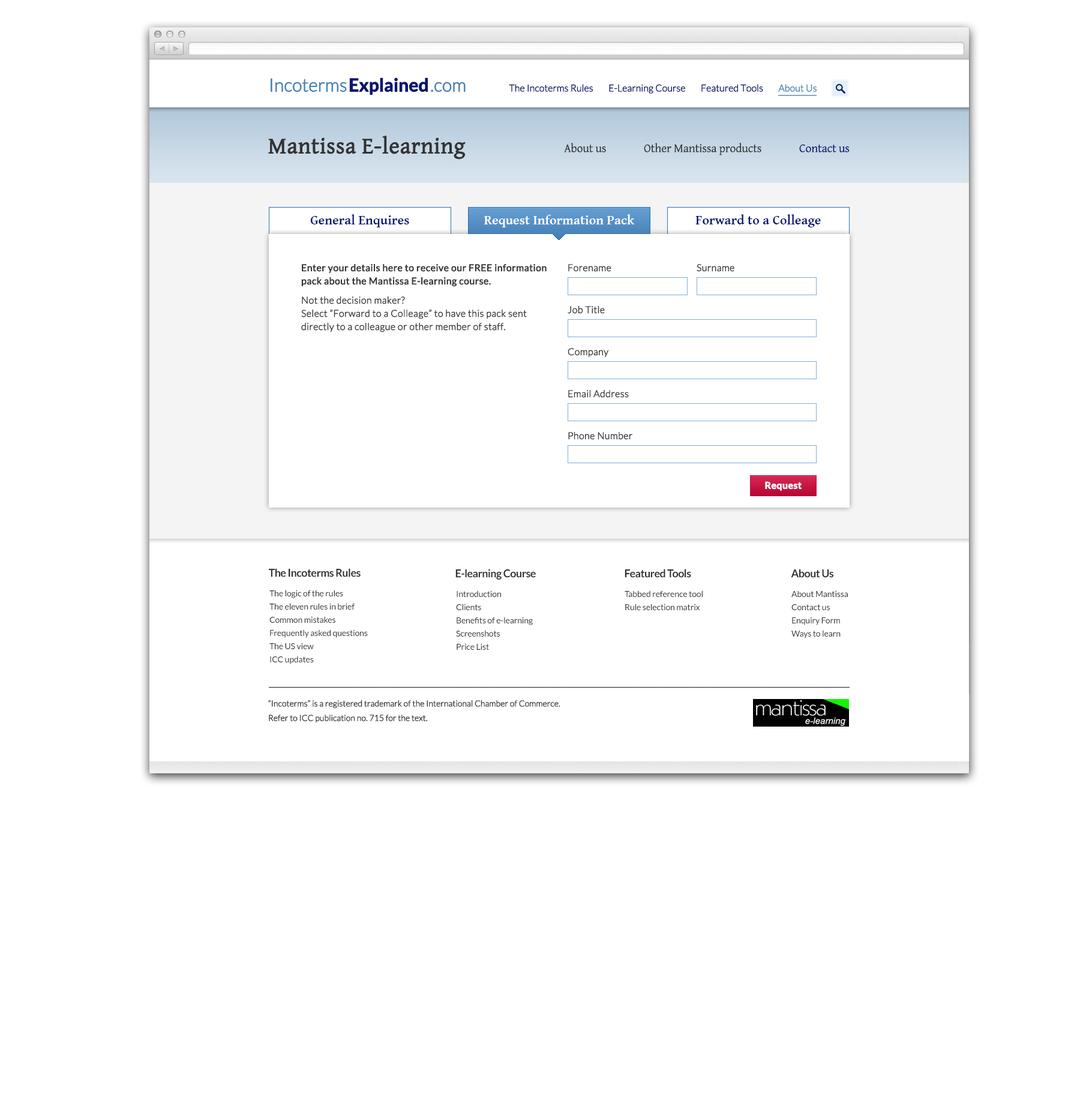
<style>
.page{position:relative;width:1080px;height:1104px;background:#ffffff}
.page>*{position:absolute;margin:0}
.t1{font:18px "Lato-Light";letter-spacing:-0.02em;color:#4983b7;font-weight:bold}
.t2{font:18px "Lato-Bold";letter-spacing:-0.02em;color:#091770;font-weight:bold}
.t3{font:18px "Lato-Light";letter-spacing:-0.02em;color:#4882b7;font-weight:bold}
.t4{font:14.4px "Lato-Regular";letter-spacing:-0.02em;color:#ffffff;font-weight:bold}
.t5{font:14.4px "Lato-Regular";letter-spacing:-0.02em;color:#ffffff;text-transform:uppercase;font-weight:bold}
.t6{font:9.6px "Lato-Light";letter-spacing:-0.02em;color:#091770;font-weight:bold}
.t7{font:9.6px "Lato-Light";letter-spacing:-0.02em;color:#4882b7;font-weight:bold}
.t8{font:22.8px "GentiumBasic";color:#333333;font-weight:bold}
.t9{font:25.9px "GentiumBasic";letter-spacing:-0.02em;color:#ffffff;text-transform:uppercase;font-weight:bold}
.t10{font:12px "GentiumBasic";letter-spacing:-0.01em;color:#333333}
.t11{font:12px "GentiumBasic";letter-spacing:-0.01em;color:#091770}
.t12{font:13.2px "GentiumBasic-Bold";color:#091770}
.t13{font:13.2px "GentiumBasic-Bold";color:#ffffff}
.t14{font:9.6px/13.2px "Lato-Light";color:#383838;font-weight:bold}
.t15{font:9.6px/13.2px "Lato-Regular";color:#383838;font-weight:bold}
.t16{font:9.6px "Lato-Light";color:#383838;font-weight:bold}
.t17{font:9.6px "Lato-Bold";color:#ffffff;font-weight:bold}
.t18{font:10.8px "Lato-Bold";letter-spacing:-0.03em;color:#333333}
.t19{font:8.4px/13.2px "Lato-Regular";letter-spacing:-0.01em;color:#333333}
.t20{font:8.4px/14.5px "Lato-Light";letter-spacing:-0.02em;color:#333333;font-weight:bold}
</style>
<div class="page">
<p class="t1" style="left:271px;top:77px;width:195px;height:18px">Incoterms<span class="t2">Explained</span><span class="t3">.com<br></span><span class="t4"><br></span><span class="t5"></span></p>
<p class="t6" style="left:509px;top:84px;width:308px;height:10px">The Incoterms Rules        E-Learning Course        Featured Tools        <span class="t7">About Us</span></p>
<p class="t8" style="left:268px;top:135px;width:198px;height:25px">Mantissa E-learning<br><span class="t9"></span></p>
<p class="t10" style="left:563px;top:143px;width:287px;height:12px">About us               Other Mantissa products               <span class="t11">Contact us</span></p>
<p class="t12" style="left:310px;top:214px;width:99px;height:13px">General Enquires</p>
<p class="t13" style="left:484px;top:214px;width:151px;height:13px">Request Information Pack</p>
<p class="t12" style="left:695px;top:214px;width:126px;height:13px">Forward to a Colleage</p>
<p class="t14" style="left:301px;top:264px;width:246px;height:68px"><span class="t15">Enter your details here to receive our FREE information pack about the Mantissa E-learning course. <br></span>Not the decision maker?<br>Select “Forward to a Colleage” to have this pack sent directly to a colleague or other member of staff.</p>
<p class="t16" style="left:568px;top:264px;width:43px;height:8px">Forename</p>
<p class="t16" style="left:697px;top:264px;width:37px;height:8px">Surname</p>
<p class="t16" style="left:568px;top:306px;width:37px;height:8px">Job Title</p>
<p class="t16" style="left:568px;top:348px;width:41px;height:9px">Company</p>
<p class="t16" style="left:568px;top:390px;width:61px;height:8px">Email Address</p>
<p class="t16" style="left:568px;top:432px;width:64px;height:8px">Phone Number</p>
<p class="t17" style="left:765px;top:481px;width:37px;height:10px">Request</p>
<p class="t18" style="left:268px;top:568px;width:93px;height:9px">The Incoterms Rules</p>
<p class="t18" style="left:455px;top:569px;width:81px;height:11px">E-learning Course</p>
<p class="t18" style="left:625px;top:569px;width:66px;height:9px">Featured Tools</p>
<p class="t18" style="left:791px;top:569px;width:42px;height:9px">About Us</p>
<p class="t19" style="left:269px;top:590px;width:99px;height:74px">The logic of the rules<br>The eleven rules in brief<br>Common mistakes<br>Frequently asked questions<br>The US view<br>ICC updates</p>
<p class="t19" style="left:456px;top:590px;width:77px;height:60px">Introduction<br>Clients<br>Benefits of e-learning<br>Screenshots<br>Price List</p>
<p class="t19" style="left:625px;top:590px;width:78px;height:20px">Tabbed reference tool <br>Rule selection matrix</p>
<p class="t19" style="left:791px;top:590px;width:57px;height:48px">About Mantissa<br>Contact us<br>Enquiry Form<br>Ways to learn</p>
<p class="t20" style="left:268px;top:700px;width:292px;height:23px">“Incoterms” is a registered trademark of the International Chamber of Commerce. <br>Refer to ICC publication no. 715 for the text.</p>
</div>
